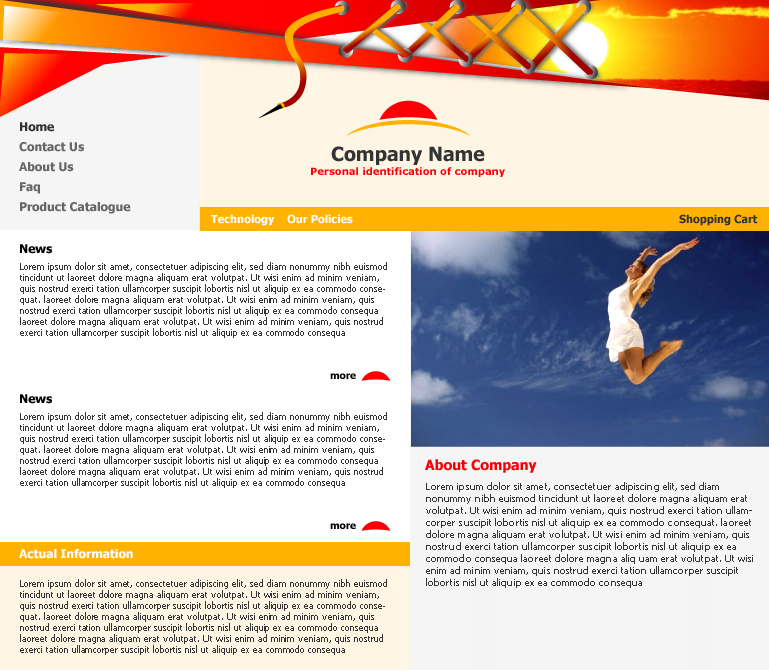
<style>
.page{position:relative;width:769px;height:670px;background:#ffffff}
.page>*{position:absolute;margin:0}
.t1{font:12px "Tahoma-Bold";color:#333333}
.t2{font:12px/20px "Tahoma-Bold";color:#666666}
.t3{font:19.5px "Tahoma-Bold";color:#333333}
.t4{font:10px "Verdana-Bold";color:#fc0008}
.t5{font:11px "Tahoma-Bold";color:#ffffff}
.t6{font:11px "Tahoma-Bold";color:#333333}
.t7{font:12px "Tahoma-Bold";color:#000000}
.t8{font:9px/11px "Tahoma";color:#333333}
.t9{font:10px "Tahoma-Bold";color:#000000}
.t10{font:14px "Tahoma-Bold";color:#fc0008}
.t11{font:10px/12px "Tahoma";color:#333333}
.t12{font:12px "Tahoma-Bold";color:#ffffff}
</style>
<div class="page">
<p class="t1" style="left:20px;top:122px;width:34px;height:10px">Home</p>
<p class="t2" style="left:19px;top:142px;width:112px;height:72px">Contact Us<br>About Us<br>Faq<br>Product Catalogue</p>
<p class="t3" style="left:331px;top:146px;width:154px;height:19px">Company Name</p>
<p class="t4" style="left:311px;top:167px;width:194px;height:10px">Personal identification of company</p>
<p class="t5" style="left:211px;top:214px;width:142px;height:12px">Technology    Our Policies</p>
<p class="t6" style="left:679px;top:214px;width:79px;height:12px">Shopping Cart</p>
<p class="t7" style="left:20px;top:244px;width:32px;height:10px">News</p>
<p class="t8" style="left:20px;top:262px;width:367px;height:76px">Lorem ipsum dolor sit amet, consectetuer adipiscing elit, sed diam nonummy nibh euismod tincidunt ut laoreet dolore magna aliquam erat volutpat. Ut wisi enim ad minim veniam, quis nostrud exerci tation ullamcorper suscipit lobortis nisl ut aliquip ex ea commodo consequat. laoreet dolore magna aliquam erat volutpat. Ut wisi enim ad minim veniam, quis nostrud exerci tation ullamcorper suscipit lobortis nisl ut aliquip ex ea commodo consequa laoreet dolore magna aliquam erat volutpat. Ut wisi enim ad minim veniam, quis nostrud exerci tation ullamcorper suscipit lobortis nisl ut aliquip ex ea commodo consequa</p>
<p class="t9" style="left:330px;top:373px;width:26px;height:6px">more</p>
<p class="t7" style="left:20px;top:394px;width:32px;height:10px">News</p>
<p class="t8" style="left:20px;top:412px;width:367px;height:76px">Lorem ipsum dolor sit amet, consectetuer adipiscing elit, sed diam nonummy nibh euismod tincidunt ut laoreet dolore magna aliquam erat volutpat. Ut wisi enim ad minim veniam, quis nostrud exerci tation ullamcorper suscipit lobortis nisl ut aliquip ex ea commodo consequat. laoreet dolore magna aliquam erat volutpat. Ut wisi enim ad minim veniam, quis nostrud exerci tation ullamcorper suscipit lobortis nisl ut aliquip ex ea commodo consequa laoreet dolore magna aliquam erat volutpat. Ut wisi enim ad minim veniam, quis nostrud exerci tation ullamcorper suscipit lobortis nisl ut aliquip ex ea commodo consequa</p>
<p class="t10" style="left:425px;top:459px;width:112px;height:14px">About Company</p>
<p class="t11" style="left:426px;top:482px;width:327px;height:106px">Lorem ipsum dolor sit amet, consectetuer adipiscing elit, sed diam nonummy nibh euismod tincidunt ut laoreet dolore magna aliquam erat volutpat. Ut wisi enim ad minim veniam, quis nostrud exerci tation ullamcorper suscipit lobortis nisl ut aliquip ex ea commodo consequat. laoreet dolore magna aliquam erat volutpat. Ut wisi enim ad minim veniam, quis nostrud exerci tation ullamcorper suscipit lobortis nisl ut aliquip ex ea commodo consequa laoreet dolore magna aliq uam erat volutpat. Ut wisi enim ad minim veniam, quis nostrud exerci tation ullamcorper suscipit lobortis nisl ut aliquip ex ea commodo consequa</p>
<p class="t9" style="left:330px;top:523px;width:26px;height:6px">more</p>
<p class="t12" style="left:19px;top:549px;width:114px;height:10px">Actual Information</p>
<p class="t8" style="left:20px;top:579px;width:367px;height:76px">Lorem ipsum dolor sit amet, consectetuer adipiscing elit, sed diam nonummy nibh euismod tincidunt ut laoreet dolore magna aliquam erat volutpat. Ut wisi enim ad minim veniam, quis nostrud exerci tation ullamcorper suscipit lobortis nisl ut aliquip ex ea commodo consequat. laoreet dolore magna aliquam erat volutpat. Ut wisi enim ad minim veniam, quis nostrud exerci tation ullamcorper suscipit lobortis nisl ut aliquip ex ea commodo consequa laoreet dolore magna aliquam erat volutpat. Ut wisi enim ad minim veniam, quis nostrud exerci tation ullamcorper suscipit lobortis nisl ut aliquip ex ea commodo consequa</p>
</div>
